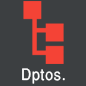
<style>
.page{position:relative;width:86px;height:86px;background:#3c3f41}
.page>*{position:absolute;margin:0}
.t1{font:15.6px "Helvetica-Normal";letter-spacing:0.06em;color:#ffffff;scale:0.89 1}
</style>
<div class="page">
<p class="t1" style="left:22px;top:68px;width:43px;height:16px">Dptos.</p>
</div>
